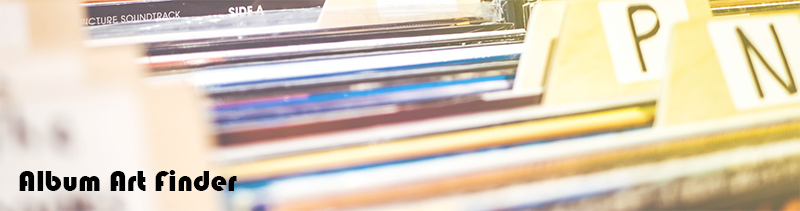
<style>
.page{position:relative;width:800px;height:211px}
.page>*{position:absolute;margin:0}
.t1{font:30px "Bauhaus93";color:#000000}
</style>
<div class="page">
<p class="t1" style="left:19px;top:170px;width:218px;height:21px">Album Art Finder</p>
</div>
